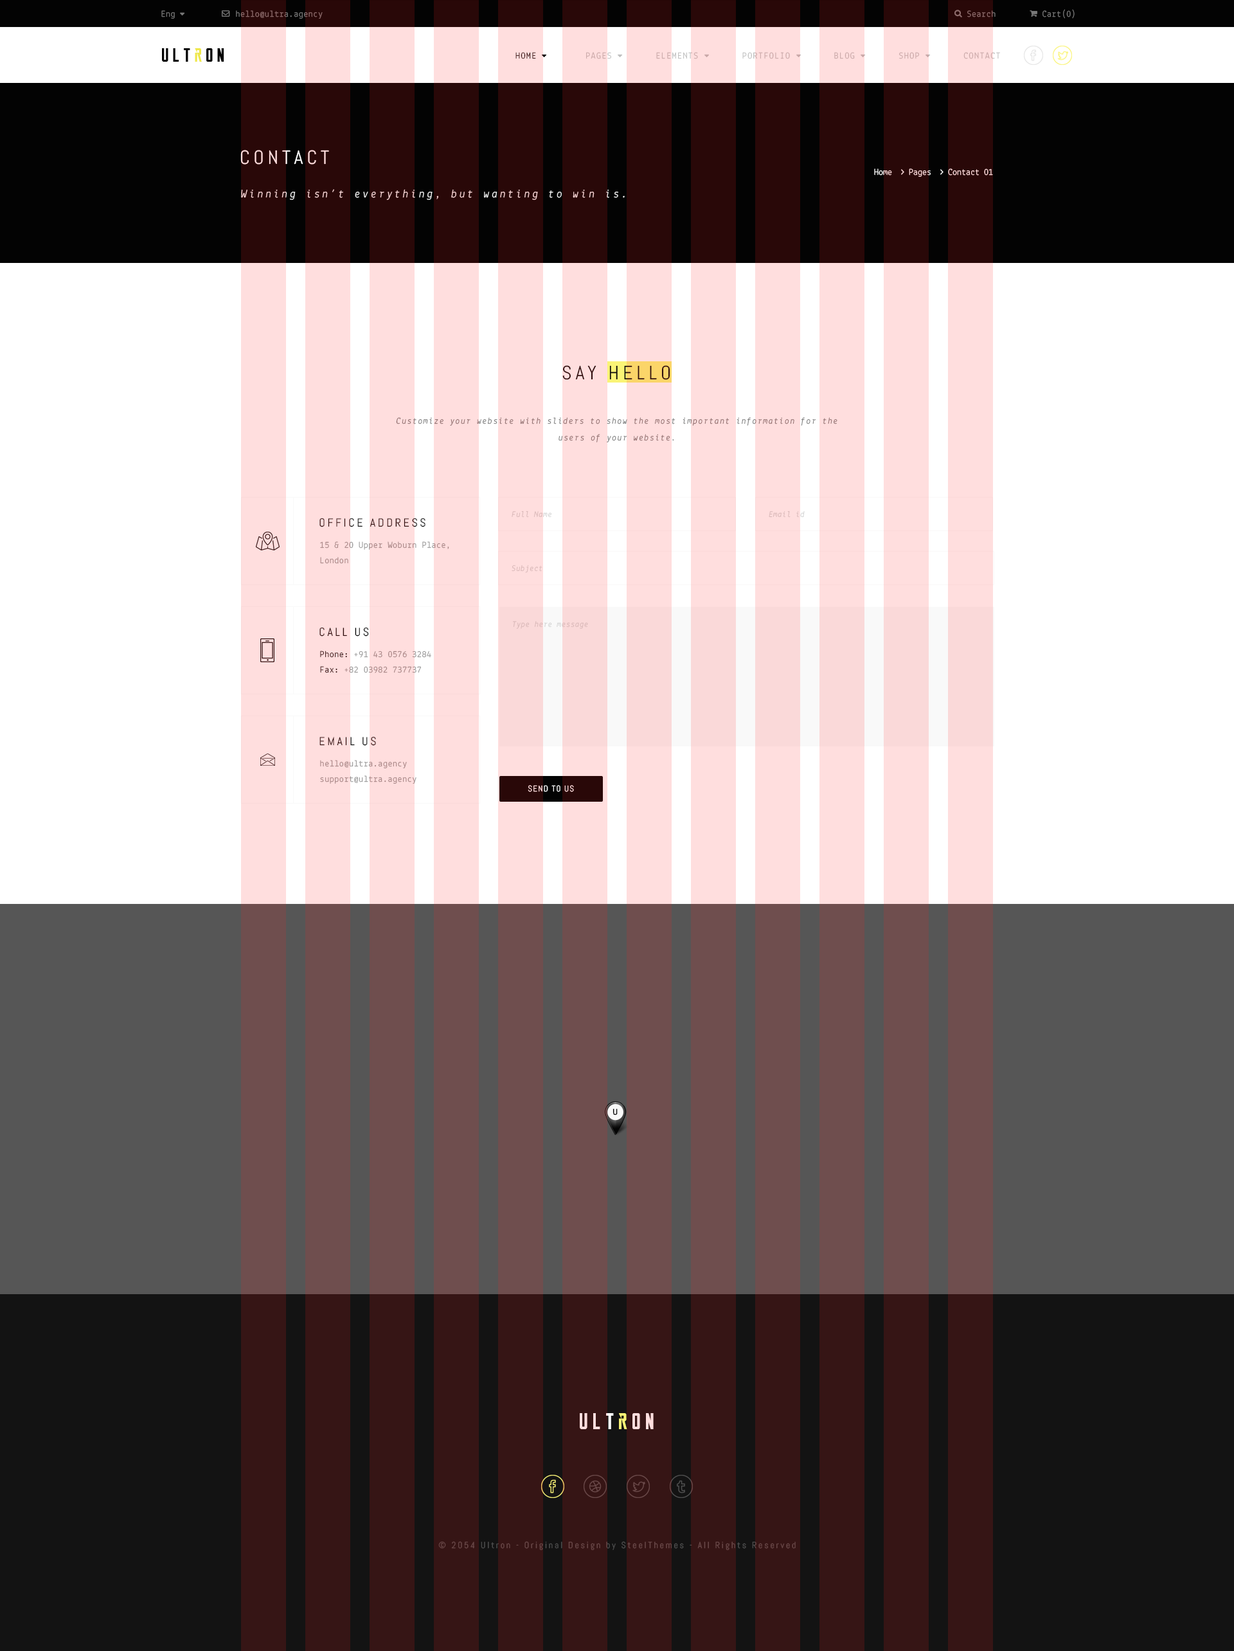
<style>
.page{position:relative;width:1234px;height:1651px;background:#ffffff}
.page>*{position:absolute;margin:0}
.t1{font:9px "Lekton-Regular";letter-spacing:0.04em;color:#787878}
.t2{font:9px "Lekton-Regular";letter-spacing:0.1em;color:#bfbfbf;text-transform:uppercase}
.t3{font:9px "Lekton-Regular";letter-spacing:0.1em;color:#030303;text-transform:uppercase}
.t4{font:19.3px "Abel-Regular";letter-spacing:0.2em;color:#ffdede;text-transform:uppercase}
.t5{font:11.6px "Lekton-Italic";letter-spacing:0.2em}
.t6{font:19.3px "Abel-Regular";letter-spacing:0.2em;color:#2f0e0e;text-transform:uppercase}
.t7{font:9px/16.7px "Lekton-Italic";letter-spacing:0.1em;color:#827171}
.t8{font:11.6px "Abel-Regular";letter-spacing:0.2em;color:#290808;text-transform:uppercase}
.t9{font:8.4px "Lekton-Italic";letter-spacing:0.04em;color:#d2d2d2}
.t10{font:9px/15.4px "Lekton-Regular";letter-spacing:0.04em;color:#969595}
.t11{font:11.6px "Abel-Regular";letter-spacing:0.2em;text-transform:uppercase}
.t12{font:9px/15.4px "Lekton-Regular";letter-spacing:0.04em;color:#030303}
.t13{font:8.4px "Abel-Regular";letter-spacing:0.1em;color:#ffffff;text-transform:uppercase}
.t14{font:9px "Lekton-Bold";color:#030303}
.t15{font:23.1px "ReckonerBold";letter-spacing:0.2em;color:#ffdede}
.t16{font:9px "Abel-Regular";letter-spacing:0.2em;color:#4f4f4f}
</style>
<div class="page">
<p class="t1" style="left:161px;top:10px;width:14px;height:9px">Eng</p>
<p class="t1" style="left:236px;top:10px;width:87px;height:9px">hello@ultra.agency</p>
<p class="t1" style="left:968px;top:10px;width:28px;height:7px">Search</p>
<p class="t1" style="left:1043px;top:9px;width:32px;height:10px">Cart(0)</p>
<p class="t2" style="left:516px;top:52px;width:484px;height:7px"><span class="t3">Home         </span>Pages        Elements        Portfolio        Blog        Shop        Contact</p>
<p class="t4" style="left:240px;top:150px;width:89px;height:15px">contact</p>
<p class="t5" style="left:241px;top:189px;width:384px;height:11px">Winning isn’t everything, but wanting to win is.</p>
<p class="t6" style="left:562px;top:365px;width:108px;height:15px">Say Hello</p>
<p class="t7" style="left:396px;top:417px;width:442px;height:25px;text-align:center">Customize your website with sliders to show the most important information for the users of your website.</p>
<p class="t8" style="left:320px;top:518px;width:106px;height:9px">Office Address</p>
<p class="t9" style="left:512px;top:511px;width:40px;height:7px">Full Name</p>
<p class="t9" style="left:769px;top:511px;width:36px;height:7px">Email id</p>
<p class="t10" style="left:320px;top:541px;width:129px;height:23px">15 &amp; 20 Upper Woburn Place,<br>London</p>
<p class="t9" style="left:512px;top:565px;width:31px;height:8px">Subject</p>
<p class="t11" style="left:320px;top:627px;width:49px;height:9px">Call us</p>
<p class="t9" style="left:513px;top:621px;width:75px;height:8px">Type here message</p>
<p class="t10" style="left:320px;top:651px;width:111px;height:22px"><span class="t12">Phone:</span> +91 43 0576 3284<br><span class="t12">Fax:</span> +82 03982 737737</p>
<p class="t8" style="left:320px;top:737px;width:56px;height:9px">Email us</p>
<p class="t10" style="left:320px;top:760px;width:97px;height:24px">hello@ultra.agency<br>support@ultra.agency</p>
<p class="t13" style="left:528px;top:785px;width:46px;height:7px">Send to us</p>
<p class="t14" style="left:613px;top:1108px;width:5px;height:7px">U</p>
<p class="t15" style="left:580px;top:1413px;width:74px;height:16px">Ultron</p>
<p class="t16" style="left:438px;top:1541px;width:358px;height:9px">© 2054 Ultron - Original Design by SteelThemes - All Rights Reserved</p>
</div>
